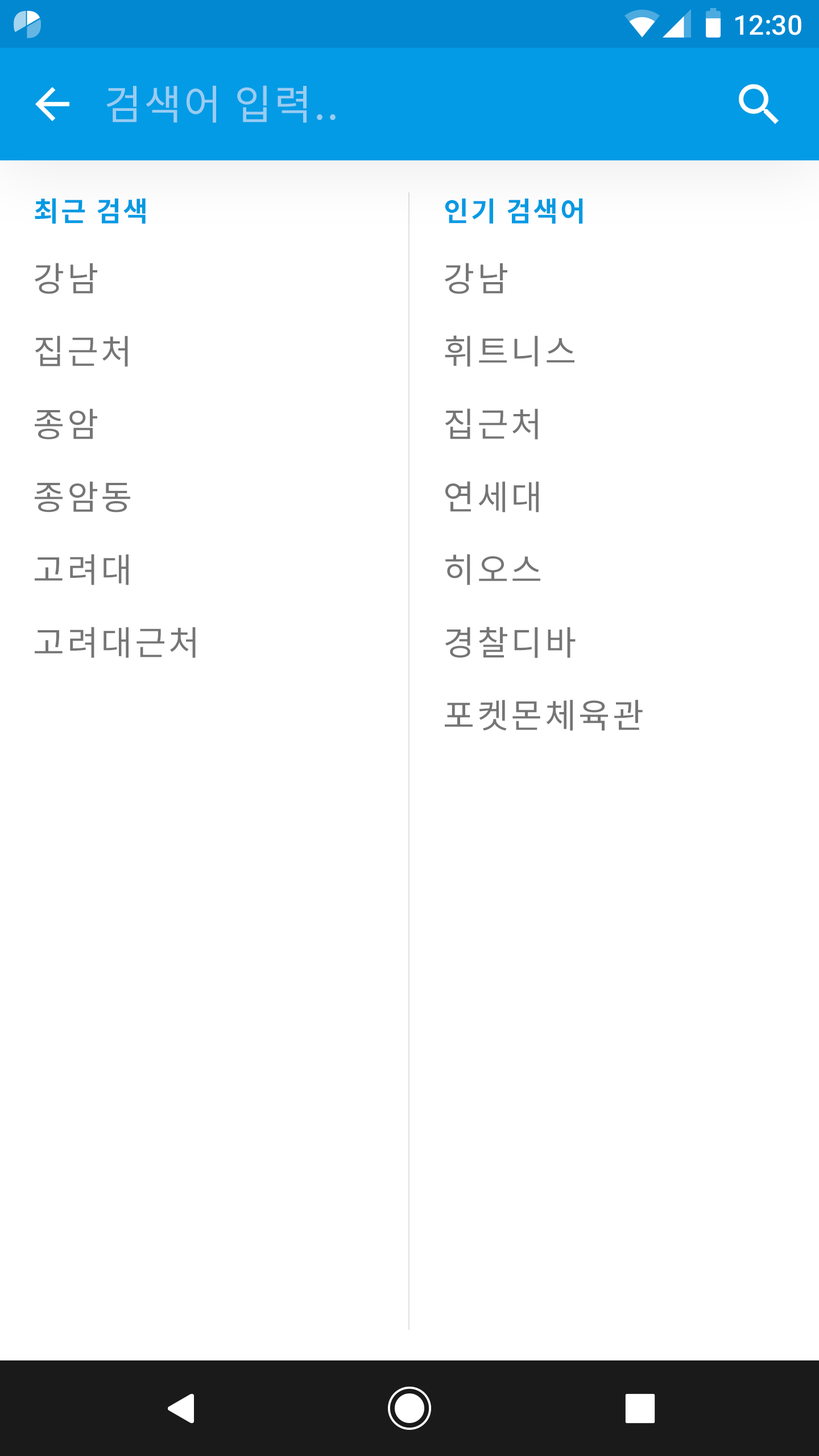
<style>
.page{position:relative;width:819px;height:1456px;background:#ffffff}
.page>*{position:absolute;margin:0}
.t1{font:27.3px "Roboto-Medium";color:#ffffff}
.t2{font:40.9px "NotoSansCJKkr-Regular";letter-spacing:0.05em;color:#99ccf1}
.t3{font:27.3px "NotoSansCJKkr-Bold";letter-spacing:0.072em;color:#039be5}
.t4{font:34.1px/72.8px "NotoSansCJKkr-Regular";letter-spacing:0.072em;color:#757575}
</style>
<div class="page">
<p class="t1" style="left:735px;top:15px;width:66px;height:20px">12:30</p>
<p class="t2" style="left:106px;top:85px;width:230px;height:38px">검색어 입력..</p>
<p class="t3" style="left:35px;top:198px;width:111px;height:26px">최근 검색</p>
<p class="t3" style="left:445px;top:198px;width:138px;height:26px">인기 검색어</p>
<p class="t4" style="left:35px;top:263px;width:161px;height:395px">강남<br>집근처<br>종암<br>종암동<br>고려대<br>고려대근처</p>
<p class="t4" style="left:445px;top:263px;width:198px;height:468px">강남<br>휘트니스<br>집근처<br>연세대<br>히오스<br>경찰디바<br>포켓몬체육관</p>
</div>
